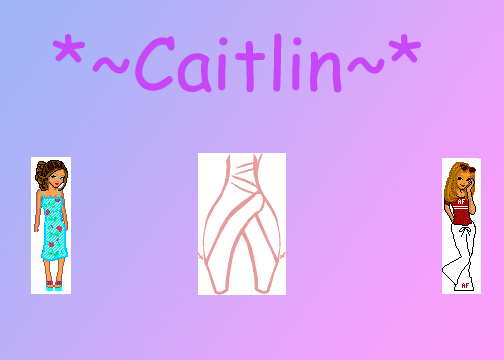
<style>
.page{position:relative;width:504px;height:360px}
.page>*{position:absolute;margin:0}
.t1{font:72px "ComicSansMS";color:#c647f5}
</style>
<div class="page">
<p class="t1" style="left:52px;top:33px;width:369px;height:60px">*~Caitlin~*</p>
</div>
